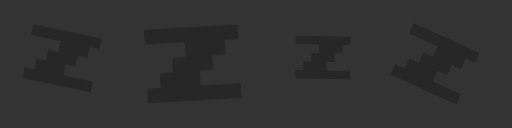
<style>
.page{position:relative;width:512px;height:128px;background:#333333}
.page>*{position:absolute;margin:0}
.t1{font:88px "PressStart2P";letter-spacing:0.05em;color:#272727;scale:0.91 1}
.t2{font:117.6px "PressStart2P";letter-spacing:0.05em;color:#272727;scale:0.91 1}
.t3{font:90.5px "PressStart2P";letter-spacing:0.05em;color:#272727;scale:0.91 1}
.t4{font:68.5px "PressStart2P";letter-spacing:0.05em;color:#272727;scale:0.92 1}
</style>
<div class="page">
<p class="t1" style="left:22px;top:24px;width:80px;height:69px;rotate:12deg">z</p>
<p class="t2" style="left:143px;top:24px;width:99px;height:80px;rotate:-3deg">z</p>
<p class="t3" style="left:390px;top:23px;width:90px;height:82px;rotate:24deg">z</p>
<p class="t4" style="left:295px;top:35px;width:56px;height:45px;rotate:1deg">z</p>
</div>
